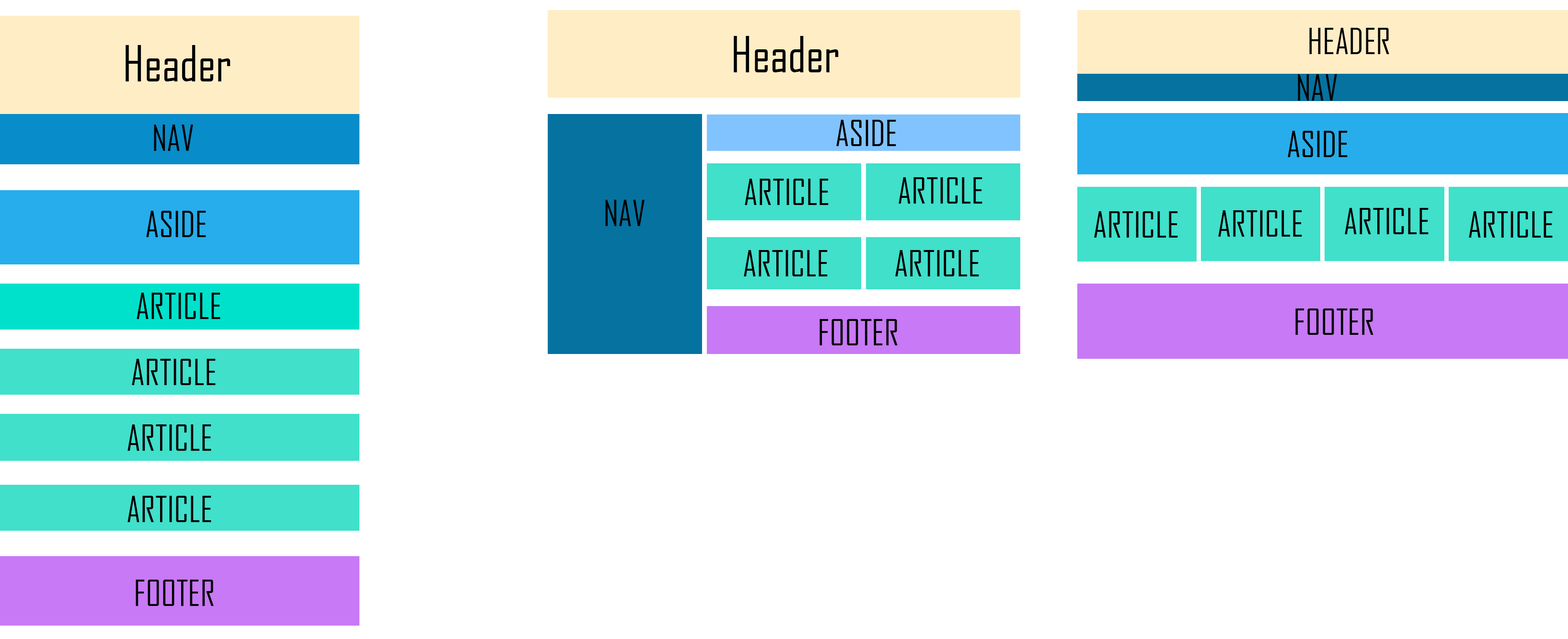
<style>
.page{position:relative;width:1568px;height:639px;background:#ffffff}
.page>*{position:absolute;margin:0}
.t1{font:34.5px "AgencyFB-Reg";color:#000000}
.t2{font:47.9px "AgencyFB-Reg";color:#000000}
</style>
<div class="page">
<p class="t1" style="left:1309px;top:28px;width:80px;height:26px">HEADER</p>
<p class="t2" style="left:734px;top:36px;width:105px;height:36px">Header</p>
<p class="t2" style="left:126px;top:45px;width:105px;height:36px">Header</p>
<p class="t1" style="left:1298px;top:74px;width:39px;height:27px">NAV</p>
<p class="t1" style="left:154px;top:125px;width:39px;height:26px">NAV</p>
<p class="t1" style="left:836px;top:120px;width:60px;height:26px">ASIDE</p>
<p class="t1" style="left:1288px;top:131px;width:60px;height:26px">ASIDE</p>
<p class="t1" style="left:745px;top:179px;width:84px;height:26px">ARTICLE</p>
<p class="t1" style="left:899px;top:177px;width:83px;height:27px">ARTICLE</p>
<p class="t1" style="left:605px;top:200px;width:40px;height:26px">NAV</p>
<p class="t1" style="left:1345px;top:208px;width:84px;height:26px">ARTICLE</p>
<p class="t1" style="left:146px;top:211px;width:60px;height:26px">ASIDE</p>
<p class="t1" style="left:1094px;top:211px;width:84px;height:27px">ARTICLE</p>
<p class="t1" style="left:1218px;top:210px;width:84px;height:27px">ARTICLE</p>
<p class="t1" style="left:1469px;top:211px;width:84px;height:27px">ARTICLE</p>
<p class="t1" style="left:744px;top:250px;width:84px;height:27px">ARTICLE</p>
<p class="t1" style="left:895px;top:250px;width:84px;height:27px">ARTICLE</p>
<p class="t1" style="left:137px;top:293px;width:83px;height:26px">ARTICLE</p>
<p class="t1" style="left:1295px;top:309px;width:78px;height:26px">FOOTER</p>
<p class="t1" style="left:819px;top:319px;width:79px;height:27px">FOOTER</p>
<p class="t1" style="left:132px;top:359px;width:84px;height:26px">ARTICLE</p>
<p class="t1" style="left:127px;top:425px;width:84px;height:26px">ARTICLE</p>
<p class="t1" style="left:127px;top:496px;width:84px;height:26px">ARTICLE</p>
<p class="t1" style="left:136px;top:580px;width:78px;height:26px">FOOTER</p>
</div>
